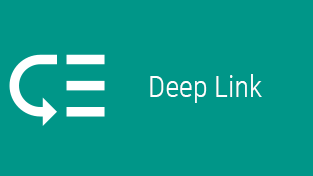
<style>
.page{position:relative;width:313px;height:176px;background:#009688}
.page>*{position:absolute;margin:0}
.t1{font:30px "RobotoCondensed-Light";color:#ffffff}
</style>
<div class="page">
<p class="t1" style="left:150px;top:74px;width:112px;height:29px">Deep Link</p>
</div>
